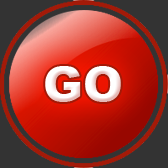
<style>
.page{position:relative;width:168px;height:168px;background:#333333}
.page>*{position:absolute;margin:0}
.t1{font:48px "Arial-Black";color:#ffffff}
</style>
<div class="page">
<p class="t1" style="left:45px;top:66px;width:76px;height:36px">GO</p>
</div>
